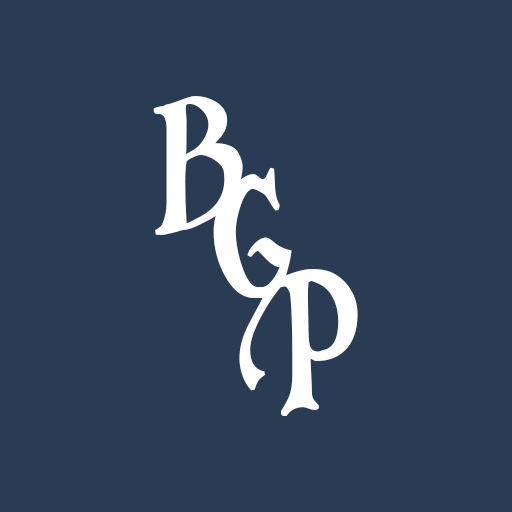
<style>
.page{position:relative;width:512px;height:512px;background:#293c53}
.page>*{position:absolute;margin:0}
.t1{font:168px "Folkard";color:#ffffff;font-weight:bold;scale:0.71 1}
</style>
<div class="page">
<p class="t1" style="left:153px;top:96px;width:90px;height:139px">B</p>
<p class="t1" style="left:213px;top:167px;width:79px;height:224px">G</p>
<p class="t1" style="left:276px;top:269px;width:82px;height:147px">P</p>
</div>
